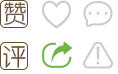
<style>
.page{position:relative;width:118px;height:74px;background:#ffffff}
.page>*{position:absolute;margin:0}
.t1{font:24px "HY-XiZYJ";letter-spacing:0.02em;color:#6d5a43}
.t2{font:24px "HY-XiZYJ";letter-spacing:0.02em;color:#644f33}
</style>
<div class="page">
<p class="t1" style="left:4px;top:2px;width:22px;height:23px">赞</p>
<p class="t2" style="left:3px;top:46px;width:23px;height:22px">评</p>
</div>
